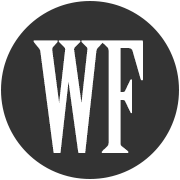
<style>
.page{position:relative;width:180px;height:180px;background:#333333}
.page>*{position:absolute;margin:0}
.t1{font:150px "BirchStd";letter-spacing:-0.025em;color:#ffffff}
</style>
<div class="page">
<p class="t1" style="left:33px;top:40px;width:110px;height:113px">WF</p>
</div>
